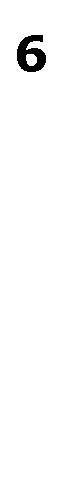
<style>
.page{position:relative;width:64px;height:500px;background:#ffffff}
.page>*{position:absolute;margin:0}
.t1{font:48px "Verdana-Bold";color:#000000}
</style>
<div class="page">
<p class="t1" style="left:17px;top:35px;width:29px;height:37px">6</p>
</div>
